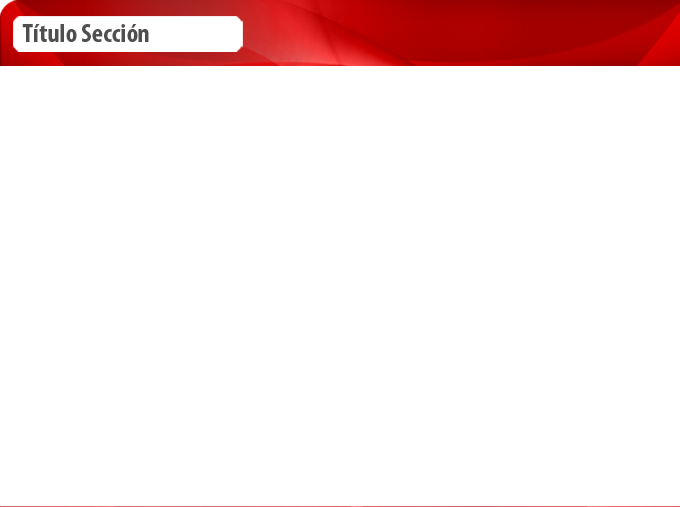
<style>
.page{position:relative;width:680px;height:507px;background:#ffffff}
.page>*{position:absolute;margin:0}
.t1{font:26.6px "MyriadPro-BoldCond";color:#4f4f4f}
</style>
<div class="page">
<p class="t1" style="left:22px;top:24px;width:127px;height:18px">Título Sección</p>
</div>
